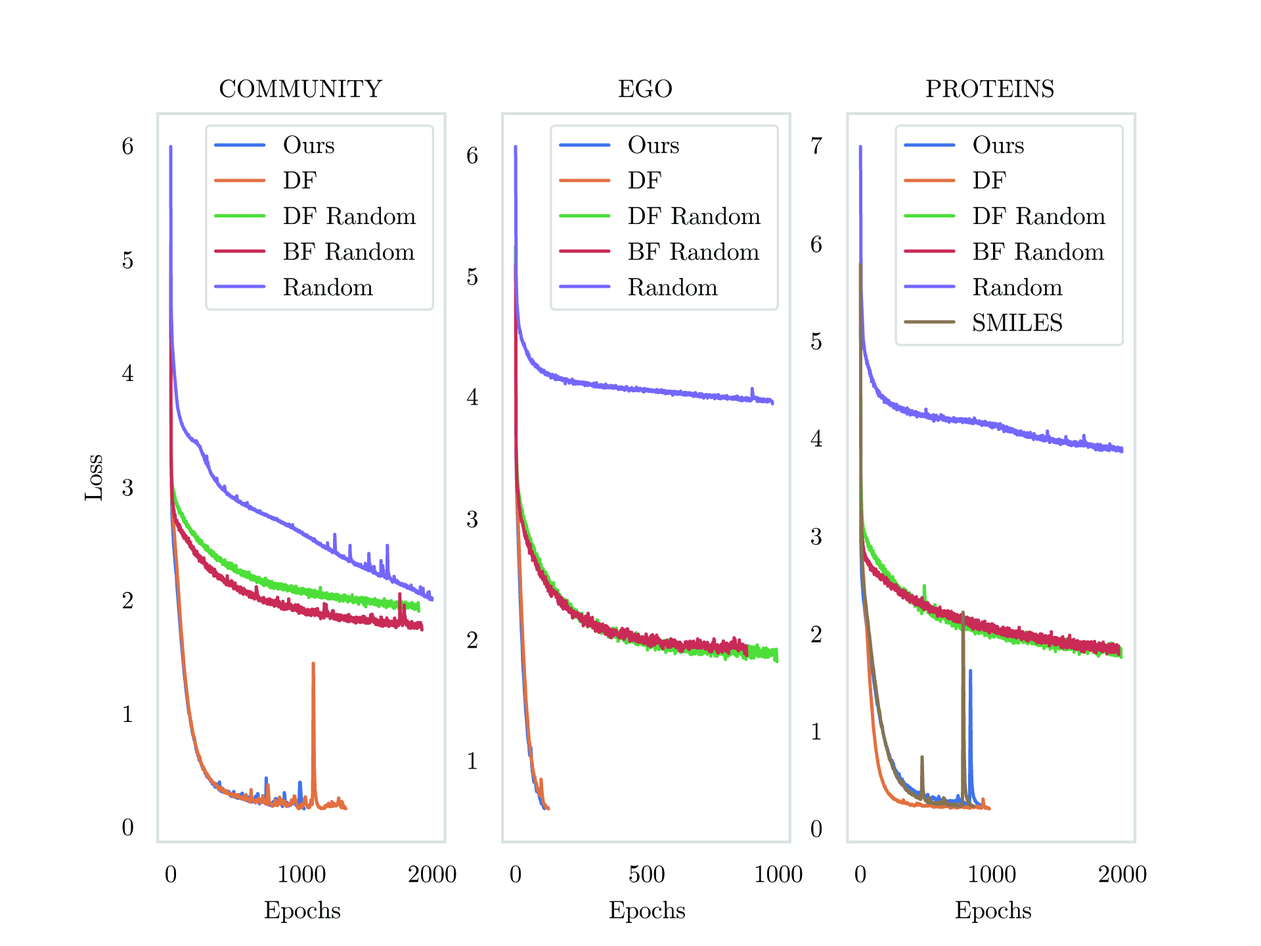
<style>
.page{position:relative;width:1261px;height:946px;background:#ffffff}
.page>*{position:absolute;margin:0}
.t1{font:24.6px "CMUSerif-Roman";color:#060808}
.t2{font:24.6px/35.6px "CMUSerif-Roman";color:#060808}
</style>
<div class="page">
<p class="t1" style="left:220px;top:79px;width:163px;height:19px">COMMUNITY</p>
<p class="t1" style="left:619px;top:79px;width:53px;height:19px">EGO</p>
<p class="t1" style="left:926px;top:79px;width:127px;height:19px">PROTEINS</p>
<p class="t1" style="left:122px;top:137px;width:11px;height:17px">6</p>
<p class="t2" style="left:284px;top:135px;width:132px;height:161px">Ours<br>DF<br>DF Random<br>BF Random<br>Random</p>
<p class="t2" style="left:628px;top:135px;width:133px;height:161px">Ours<br>DF<br>DF Random<br>BF Random<br>Random</p>
<p class="t1" style="left:811px;top:137px;width:11px;height:17px">7</p>
<p class="t2" style="left:973px;top:135px;width:133px;height:197px">Ours<br>DF<br>DF Random<br>BF Random<br>Random<br>SMILES</p>
<p class="t1" style="left:467px;top:146px;width:10px;height:18px">6</p>
<p class="t1" style="left:811px;top:235px;width:11px;height:18px">6</p>
<p class="t1" style="left:123px;top:251px;width:10px;height:18px">5</p>
<p class="t1" style="left:467px;top:267px;width:10px;height:18px">5</p>
<p class="t1" style="left:811px;top:332px;width:11px;height:18px">5</p>
<p class="t1" style="left:122px;top:364px;width:11px;height:17px">4</p>
<p class="t1" style="left:467px;top:387px;width:11px;height:18px">4</p>
<p class="t1" style="left:810px;top:429px;width:12px;height:18px">4</p>
<p class="t1" style="left:85px;top:454px;width:17px;height:46px;rotate:-90deg">Loss</p>
<p class="t1" style="left:122px;top:479px;width:11px;height:17px">3</p>
<p class="t1" style="left:467px;top:510px;width:10px;height:17px">3</p>
<p class="t1" style="left:811px;top:527px;width:11px;height:18px">3</p>
<p class="t1" style="left:123px;top:592px;width:10px;height:16px">2</p>
<p class="t1" style="left:811px;top:625px;width:11px;height:17px">2</p>
<p class="t1" style="left:467px;top:631px;width:10px;height:17px">2</p>
<p class="t1" style="left:123px;top:705px;width:9px;height:17px">1</p>
<p class="t1" style="left:812px;top:722px;width:9px;height:17px">1</p>
<p class="t1" style="left:468px;top:752px;width:9px;height:17px">1</p>
<p class="t1" style="left:122px;top:818px;width:11px;height:17px">0</p>
<p class="t1" style="left:811px;top:820px;width:11px;height:17px">0</p>
<p class="t1" style="left:165px;top:865px;width:11px;height:18px">0</p>
<p class="t1" style="left:279px;top:865px;width:47px;height:18px">1000</p>
<p class="t1" style="left:408px;top:865px;width:48px;height:18px">2000</p>
<p class="t1" style="left:510px;top:865px;width:11px;height:18px">0</p>
<p class="t1" style="left:629px;top:865px;width:36px;height:18px">500</p>
<p class="t1" style="left:756px;top:865px;width:47px;height:18px">1000</p>
<p class="t1" style="left:855px;top:865px;width:11px;height:18px">0</p>
<p class="t1" style="left:969px;top:865px;width:47px;height:18px">1000</p>
<p class="t1" style="left:1099px;top:865px;width:48px;height:18px">2000</p>
<p class="t1" style="left:265px;top:900px;width:75px;height:23px">Epochs</p>
<p class="t1" style="left:609px;top:900px;width:76px;height:23px">Epochs</p>
<p class="t1" style="left:956px;top:900px;width:75px;height:23px">Epochs</p>
</div>
